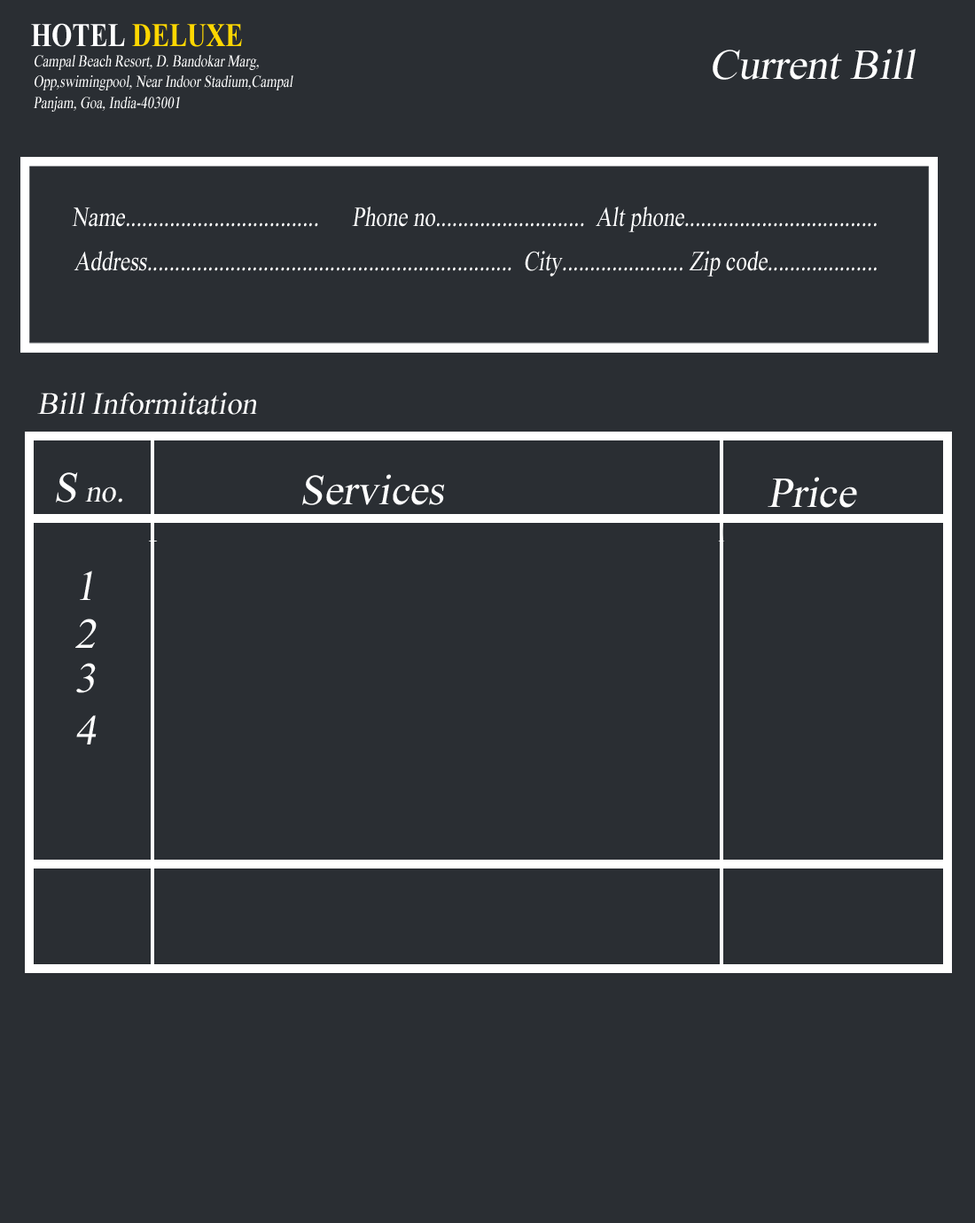
<style>
.page{position:relative;width:975px;height:1223px;background:#2a2e33}
.page>*{position:absolute;margin:0}
.t1{font:33.2px "TimesNewRomanPS-BoldMT";color:#ffd700;scale:0.8 1}
.t2{font:33.2px "TimesNewRomanPS-BoldMT";color:#ffffff;scale:0.8 1}
.t3{font:42.5px "TimesNewRomanPSMT";color:#ffffff;font-style:italic}
.t4{font:16.6px/21px "TimesNewRomanPSMT";color:#ffffff;font-style:italic;scale:0.8 1}
.t5{font:16.6px/33.2px "TimesNewRomanPSMT";color:#ffffff;font-style:italic;scale:0.8 1}
.t6{font:27.7px "TimesNewRomanPSMT";color:#ffffff;font-style:italic;scale:0.8 1}
.t7{font:31px "TimesNewRomanPSMT";color:#ffffff;font-style:italic}
</style>
<div class="page">
<p class="t1" style="left:31px;top:23px;width:211px;height:24px"><span class="t2">HOTEL </span>DELUXE</p>
<p class="t3" style="left:713px;top:49px;width:203px;height:31px">Current Bill</p>
<p class="t4" style="left:33px;top:55px;width:260px;height:57px"><span class="t5">Campal Beach Resort, </span>D. Bandokar Marg,<br>Opp,swimingpool, Near Indoor Stadium,Campal<br>Panjam, Goa, India-403001</p>
<p class="t6" style="left:72px;top:207px;width:805px;height:25px">Name...................................      Phone no...........................  Alt phone...................................</p>
<p class="t6" style="left:74px;top:251px;width:803px;height:26px">Address..................................................................  City...................... Zip code....................</p>
<p class="t7" style="left:37px;top:392px;width:220px;height:23px">Bill Informitation</p>
<p class="t7" style="left:56px;top:472px;width:66px;height:31px"><span class="t3">S</span> no.</p>
<p class="t3" style="left:302px;top:474px;width:143px;height:31px">Services</p>
<p class="t3" style="left:768px;top:477px;width:89px;height:31px">Price</p>
<p class="t3" style="left:80px;top:571px;width:12px;height:29px">1</p>
<p class="t3" style="left:75px;top:619px;width:22px;height:29px">2</p>
<p class="t3" style="left:76px;top:663px;width:20px;height:30px">3</p>
<p class="t3" style="left:76px;top:715px;width:21px;height:29px">4</p>
</div>
